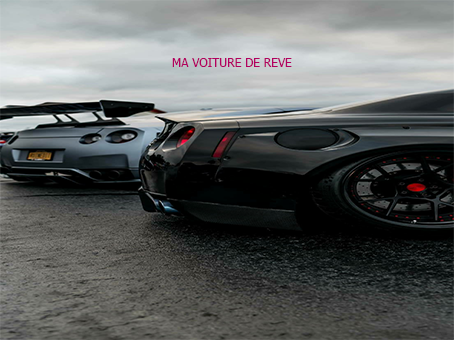
<style>
.page{position:relative;width:454px;height:340px}
.page>*{position:absolute;margin:0}
.t1{font:12px "Tahoma";color:#b3005f}
</style>
<div class="page">
<p class="t1" style="left:172px;top:58px;width:120px;height:9px">MA VOITURE DE REVE</p>
</div>
